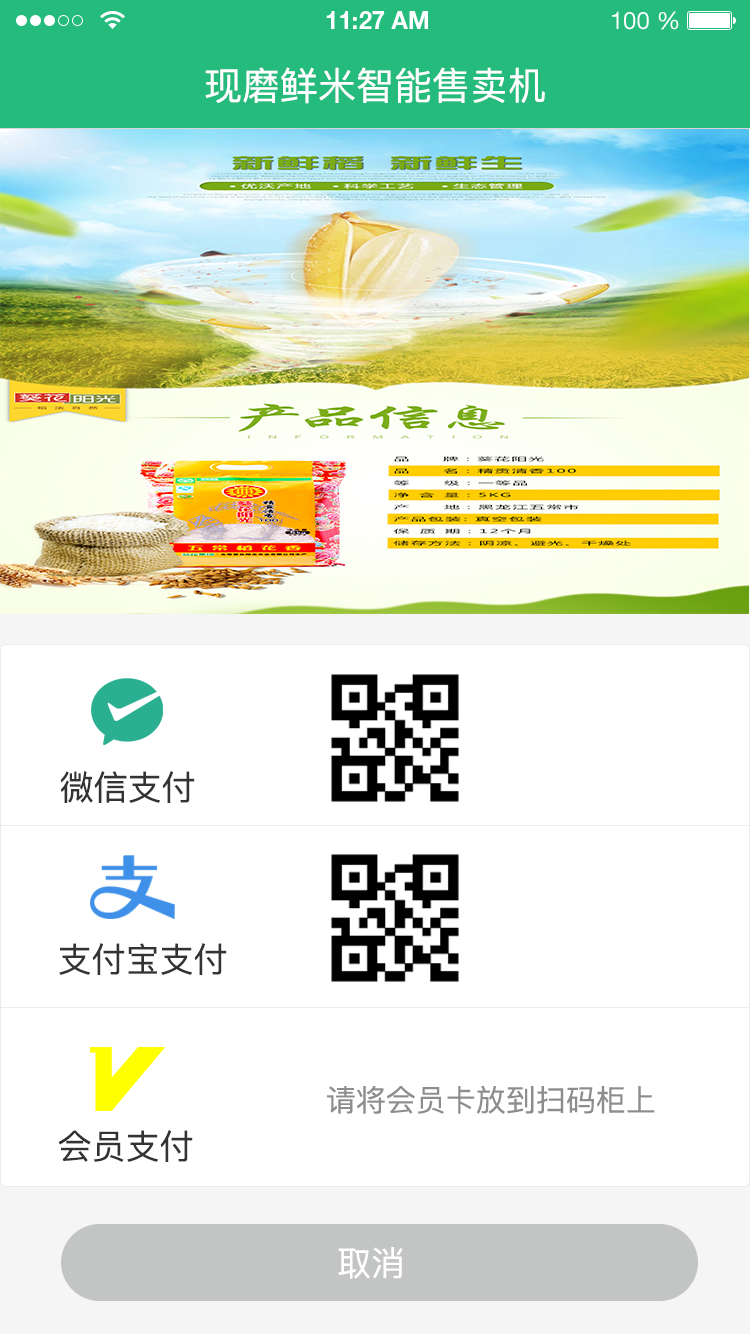
<style>
.page{position:relative;width:750px;height:1334px;background:#ffffff}
.page>*{position:absolute;margin:0}
.t1{font:24px "HelveticaNeueLTStd-Bd";color:#ffffff}
.t2{font:24px "HelveticaNeueLTStd-Roman";color:#ffffff}
.t3{font:38px "PingFangSC-Regular";color:#ffffff}
.t4{font:34px "PingFangSC-Regular";color:#333333}
.t5{font:30px "PingFangSC-Regular";color:#8e8d8e}
.t6{font:34px "PingFang-SC-Medium";color:#ffffff}
</style>
<div class="page">
<p class="t1" style="left:326px;top:11px;width:102px;height:18px">11:27 AM</p>
<p class="t2" style="left:612px;top:11px;width:67px;height:19px">100 %</p>
<p class="t3" style="left:205px;top:67px;width:340px;height:37px">现磨鲜米智能售卖机</p>
<p class="t4" style="left:60px;top:771px;width:135px;height:32px">微信支付</p>
<p class="t4" style="left:59px;top:943px;width:168px;height:32px">支付宝支付</p>
<p class="t5" style="left:327px;top:1085px;width:328px;height:29px">请将会员卡放到扫码柜上</p>
<p class="t4" style="left:58px;top:1130px;width:135px;height:32px">会员支付</p>
<p class="t6" style="left:338px;top:1247px;width:65px;height:32px">取消</p>
</div>
